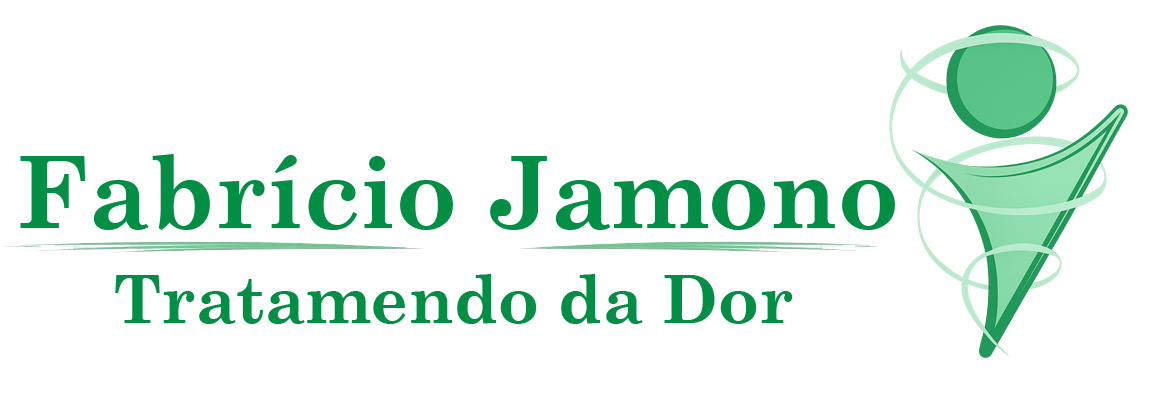
<style>
.page{position:relative;width:1151px;height:406px;background:#ffffff}
.page>*{position:absolute;margin:0}
.t1{font:100px "CenturySchoolbook-Bold";color:#028e45}
.t2{font:66.7px "CenturySchoolbook-Bold";color:#028e45}
</style>
<div class="page">
<p class="t1" style="left:20px;top:154px;width:875px;height:76px">Fabrício Jamono</p>
<p class="t2" style="left:115px;top:274px;width:678px;height:50px">Tratamendo da Dor</p>
</div>
